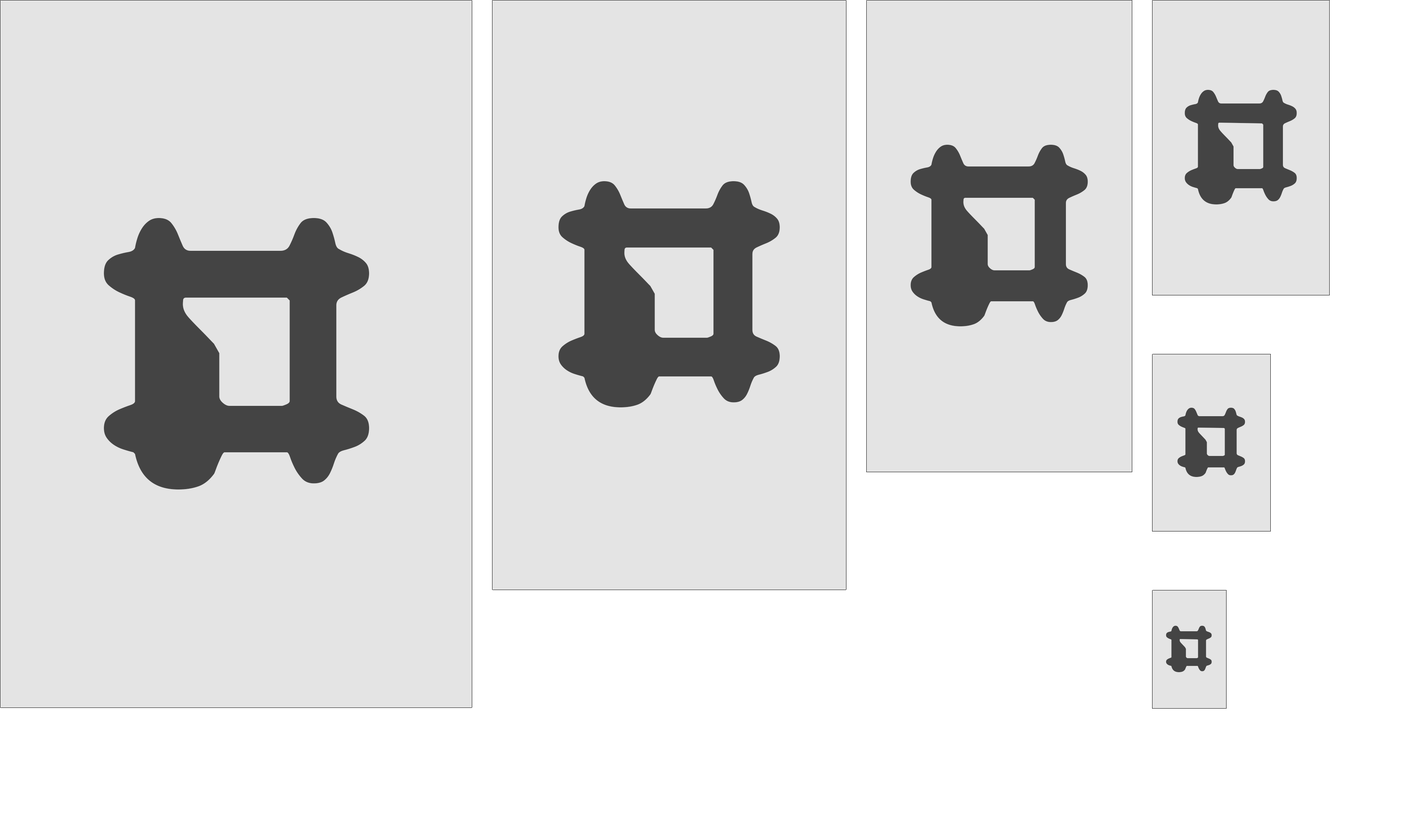
<style>
.page{position:relative;width:1421px;height:839px;background:#e4e4e4}
.page>*{position:absolute;margin:0}
.t1{font:172.6px "ChintzyCPUBRK";letter-spacing:0.5em;color:#444444}
.t2{font:273.6px "ChintzyCPUBRK";letter-spacing:0.5em;color:#444444}
.t3{font:341.6px "ChintzyCPUBRK";letter-spacing:0.5em;color:#444444}
.t4{font:409.1px "ChintzyCPUBRK";letter-spacing:0.5em;color:#444444}
.t5{font:104.4px "ChintzyCPUBRK";letter-spacing:0.5em;color:#444444}
.t6{font:70.3px "ChintzyCPUBRK";letter-spacing:0.5em;color:#444444}
</style>
<div class="page">
<p class="t1" style="left:1185px;top:90px;width:112px;height:114px">#</p>
<p class="t2" style="left:911px;top:145px;width:177px;height:181px">#</p>
<p class="t3" style="left:558px;top:181px;width:222px;height:226px">#</p>
<p class="t4" style="left:104px;top:218px;width:265px;height:272px">#</p>
<p class="t5" style="left:1177px;top:408px;width:68px;height:69px">#</p>
<p class="t6" style="left:1166px;top:626px;width:46px;height:46px">#</p>
</div>
